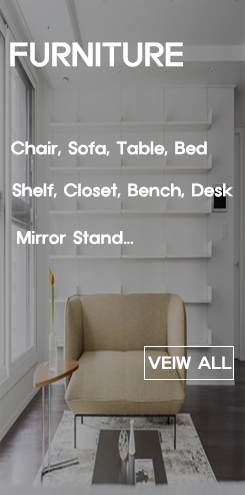
<style>
.page{position:relative;width:245px;height:495px}
.page>*{position:absolute;margin:0}
.t1{font:30px "ExpoM-HM";letter-spacing:0.01em;color:#ffffff}
.t2{font:16px "ExpoM-HM";letter-spacing:0.01em;color:#ffffff}
</style>
<div class="page">
<p class="t1" style="left:10px;top:42px;width:173px;height:25px">FURNITURE</p>
<p class="t2" style="left:11px;top:141px;width:196px;height:15px">Chair, Sofa, Table, Bed</p>
<p class="t2" style="left:12px;top:183px;width:221px;height:15px">Shelf, Closet, Bench, Desk</p>
<p class="t2" style="left:17px;top:230px;width:116px;height:15px">Mirror Stand...</p>
</div>
